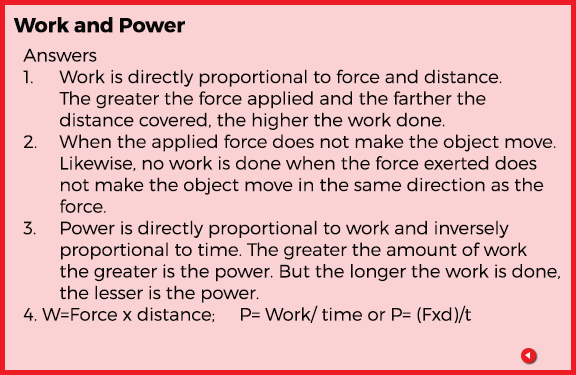
<style>
.page{position:relative;width:576px;height:375px;background:#fbd2d3}
.page>*{position:absolute;margin:0}
.t1{font:20.4px "Montserrat-Bold";color:#070707}
.t2{font:18px "Montserrat-Light";color:#070707}
</style>
<div class="page">
<p class="t1" style="left:13px;top:17px;width:172px;height:16px">Work and Power</p>
<p class="t2" style="left:23px;top:48px;width:537px;height:275px">Answers<br>1.  Work is directly proportional to force and distance.<br> The greater the force applied and the farther the<br> distance covered, the higher the work done.<br>2.  When the applied force does not make the object move.<br> Likewise, no work is done when the force exerted does<br> not make the object move in the same direction as the<br> force.<br>3.  Power is directly proportional to work and inversely<br> proportional to time. The greater the amount of work<br> the greater is the power. But the longer the work is done,<br> the lesser is the power.<br>4. W=Force x distance; P= Work/ time or P= (Fxd)/t</p>
</div>
